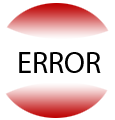
<style>
.page{position:relative;width:115px;height:120px;background:#ffffff}
.page>*{position:absolute;margin:0}
.t1{font:30px "MyriadPro-Regular";color:#000000}
</style>
<div class="page">
<p class="t1" style="left:19px;top:52px;width:82px;height:21px">ERROR</p>
</div>
